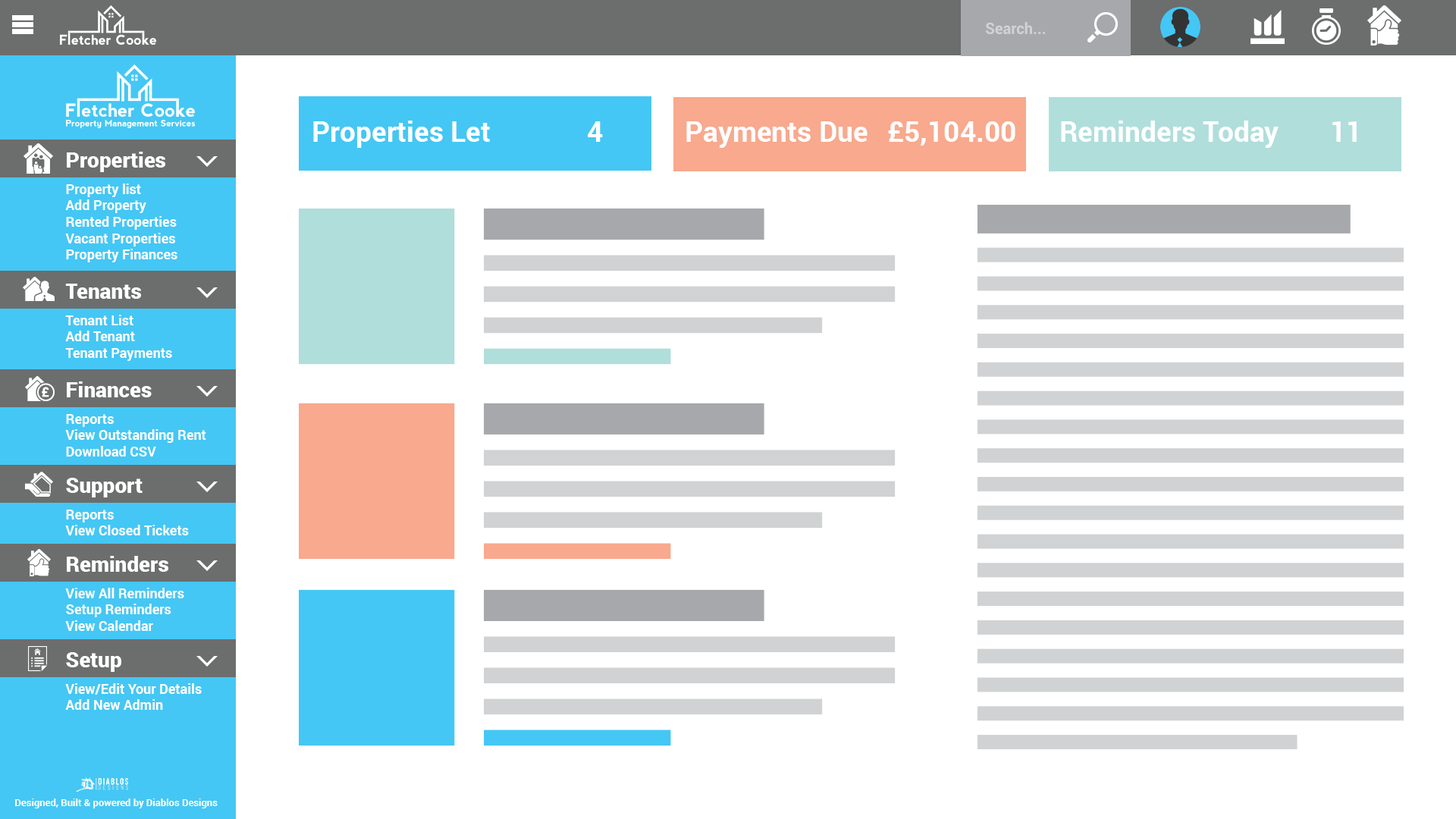
<style>
.page{position:relative;width:1456px;height:819px;background:#ffffff}
.page>*{position:absolute;margin:0}
.t1{font:28.2px "Roboto-Bold";color:#ffffff}
.t2{font:13.6px "Roboto-Bold";color:#ffffff}
.t3{font:21.2px/26.5px "Roboto-Black";color:#ffffff}
.t4{font:13.6px/26.5px "Roboto-Bold";color:#ffffff}
.t5{font:9.9px "Roboto-Bold";color:#ffffff}
</style>
<div class="page">
<p class="t1" style="left:313px;top:121px;width:177px;height:27px">Properties Let</p>
<p class="t1" style="left:588px;top:121px;width:15px;height:21px">4</p>
<p class="t1" style="left:686px;top:121px;width:182px;height:27px">Payments Due</p>
<p class="t1" style="left:888px;top:121px;width:127px;height:25px">£5,104.00</p>
<p class="t1" style="left:1061px;top:121px;width:218px;height:27px">Reminders Today</p>
<p class="t1" style="left:1332px;top:121px;width:25px;height:21px">11</p>
<p class="t2" style="left:65px;top:152px;width:112px;height:110px"><span class="t3">Properties<br></span><span class="t4">Property list<br></span>Add Property<br>Rented Properties<br>Vacant Properties<br>Property Finances</p>
<p class="t2" style="left:65px;top:284px;width:107px;height:77px"><span class="t3">Tenants<br></span><span class="t4">Tenant List<br></span>Add Tenant<br>Tenant Payments</p>
<p class="t2" style="left:65px;top:381px;width:141px;height:76px"><span class="t3">Finances<br></span><span class="t4">Reports<br></span>View Outstanding Rent<br>Download CSV</p>
<p class="t2" style="left:65px;top:478px;width:124px;height:57px"><span class="t3">Support<br></span><span class="t4">Reports<br></span>View Closed Tickets</p>
<p class="t2" style="left:65px;top:556px;width:119px;height:75px"><span class="t3">Reminders<br></span><span class="t4">View All Reminders<br></span>Setup Reminders<br>View Calendar</p>
<p class="t4" style="left:65px;top:652px;width:137px;height:58px"><span class="t3">Setup<br></span>View/Edit Your Details<br><span class="t2">Add New Admin</span></p>
<p class="t5" style="left:15px;top:799px;width:203px;height:9px">Designed, Built &amp; powered by Diablos Designs</p>
</div>
